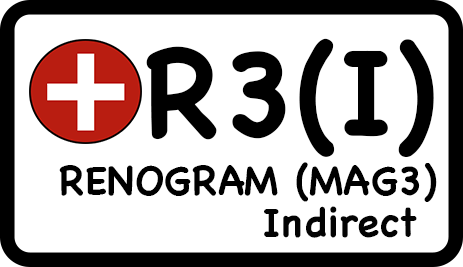
<style>
.page{position:relative;width:463px;height:267px;background:#ffffff}
.page>*{position:absolute;margin:0}
.t1{font:120px "Chalkboard-Bold";color:#000000}
.t2{font:40px "Chalkboard-Bold";color:#000000}
.t3{font:40px "Chalkboard-Bold";color:#030303}
</style>
<div class="page">
<p class="t1" style="left:146px;top:38px;width:288px;height:119px">R3(I)</p>
<p class="t2" style="left:59px;top:162px;width:378px;height:40px">RENOGRAM (MAG3)</p>
<p class="t3" style="left:264px;top:206px;width:153px;height:32px">Indirect</p>
</div>
